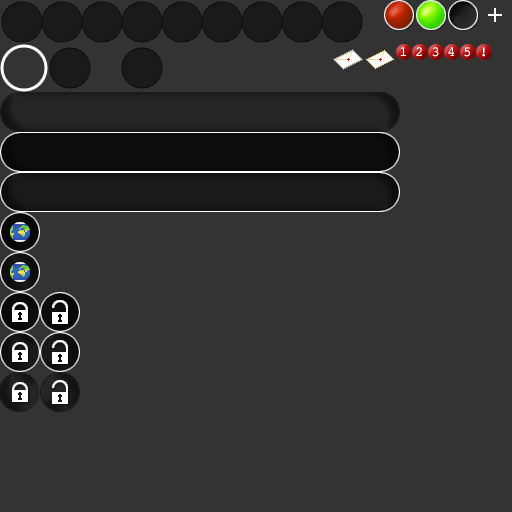
<style>
.page{position:relative;width:512px;height:512px;background:#333333}
.page>*{position:absolute;margin:0}
.t1{font:14px "Courier";letter-spacing:-0.025em;color:#ffffff}
</style>
<div class="page">
<p class="t1" style="left:400px;top:47px;width:85px;height:10px">1 2 3 4 5 !</p>
</div>
